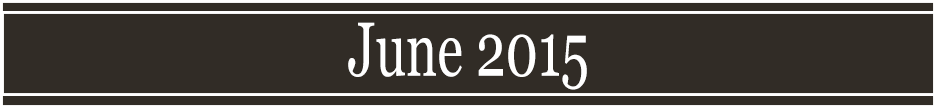
<style>
.page{position:relative;width:936px;height:108px;background:#312c26}
.page>*{position:absolute;margin:0}
.t1{font:76.5px "Georgia";color:#ffffff;scale:0.69 1}
</style>
<div class="page">
<p class="t1" style="left:348px;top:22px;width:239px;height:68px">June 2015</p>
</div>
